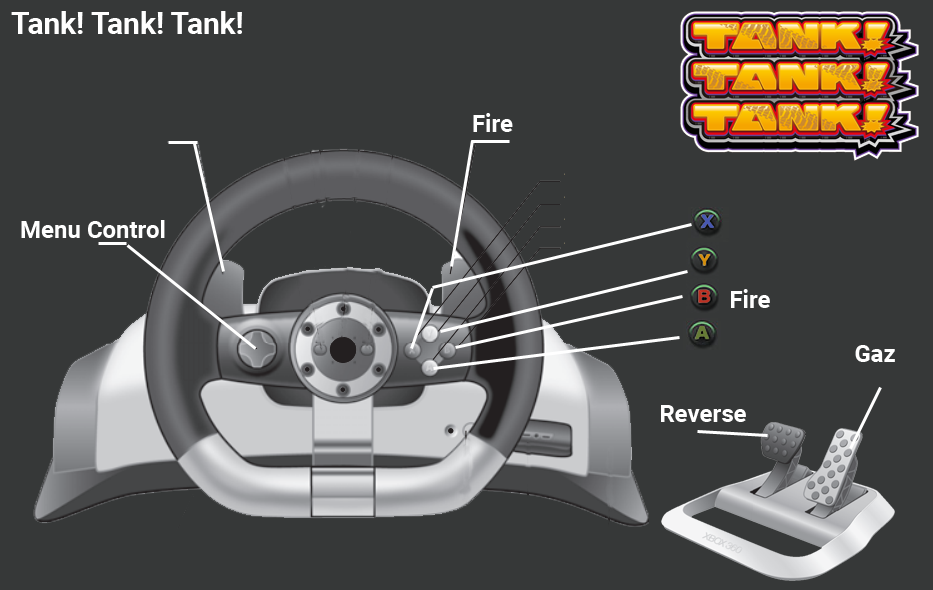
<style>
.page{position:relative;width:933px;height:590px;background:#363838}
.page>*{position:absolute;margin:0}
.t1{font:30px "Roboto-Bold";color:#ffffff}
.t2{font:24px "Roboto-Bold";color:#ffffff}
</style>
<div class="page">
<p class="t1" style="left:11px;top:11px;width:231px;height:23px">Tank! Tank! Tank!</p>
<p class="t2" style="left:473px;top:113px;width:40px;height:19px">Fire</p>
<p class="t2" style="left:21px;top:220px;width:144px;height:18px">Menu Control</p>
<p class="t2" style="left:731px;top:289px;width:39px;height:19px">Fire</p>
<p class="t2" style="left:855px;top:345px;width:40px;height:17px">Gaz</p>
<p class="t2" style="left:661px;top:405px;width:85px;height:17px">Reverse</p>
</div>
